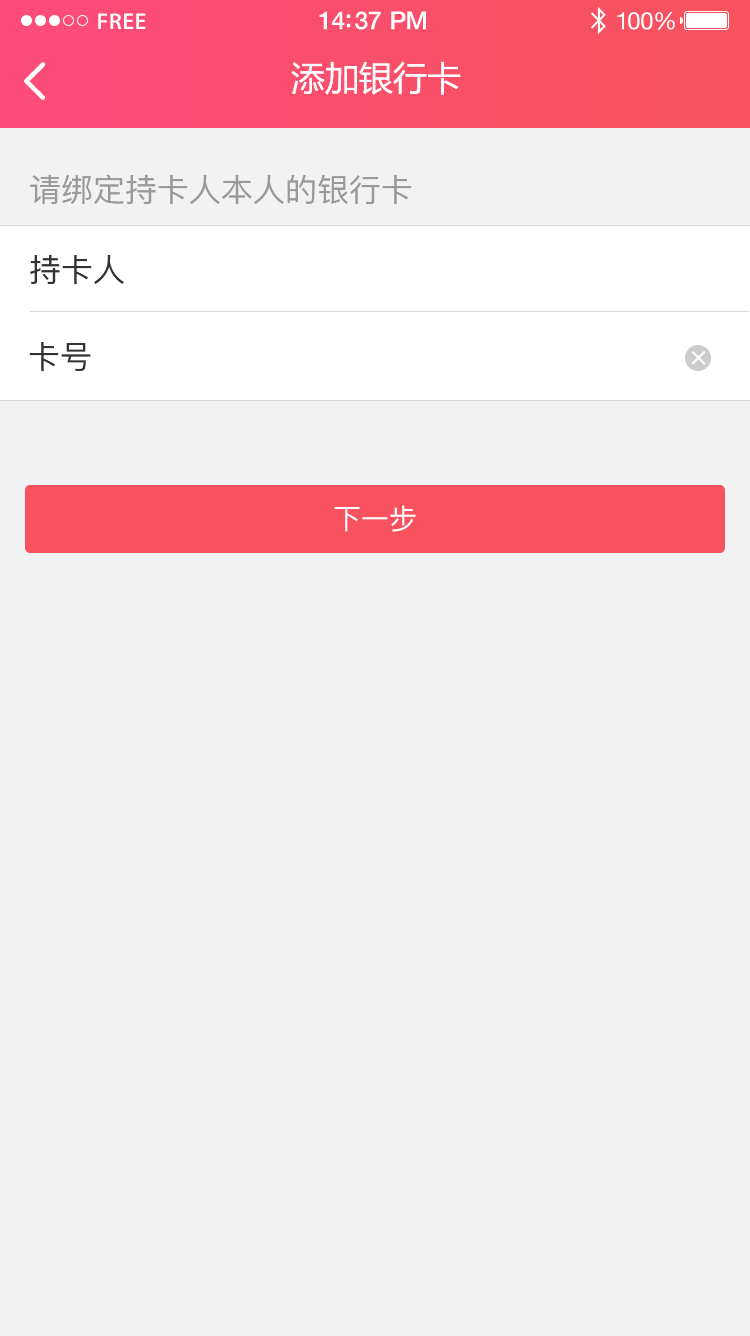
<style>
.page{position:relative;width:750px;height:1336px;background:#f2f2f2}
.page>*{position:absolute;margin:0}
.t1{font:23px "MyriadPro-Semibold";letter-spacing:0.02em;color:#ffffff}
.t2{font:25px "HelveticaNeue-Medium";letter-spacing:-0.02em;color:#ffffff}
.t3{font:24px "HelveticaNeue";letter-spacing:-0.02em;color:#ffffff}
.t4{font:34px "MicrosoftYaHei";color:#ffffff;text-transform:uppercase}
.t5{font:32px "PingFang-SC-Medium";color:#999999;text-transform:uppercase}
.t6{font:32px "PingFang-SC-Medium";color:#333333;text-transform:uppercase}
.t7{font:28px "PingFang-SC-Medium";color:#ffffff;text-transform:uppercase}
</style>
<div class="page">
<p class="t1" style="left:98px;top:13px;width:48px;height:16px">FREE</p>
<p class="t2" style="left:319px;top:11px;width:107px;height:19px">14:37 PM</p>
<p class="t3" style="left:617px;top:12px;width:58px;height:18px">100%</p>
<p class="t4" style="left:291px;top:61px;width:170px;height:34px">添加银行卡</p>
<p class="t5" style="left:30px;top:174px;width:382px;height:31px">请绑定持卡人本人的银行卡</p>
<p class="t6" style="left:30px;top:254px;width:94px;height:31px">持卡人</p>
<p class="t6" style="left:29px;top:342px;width:62px;height:30px">卡号</p>
<p class="t7" style="left:691px;top:351px;width:15px;height:14px">×</p>
<p class="t7" style="left:334px;top:505px;width:82px;height:27px">下一步</p>
</div>
